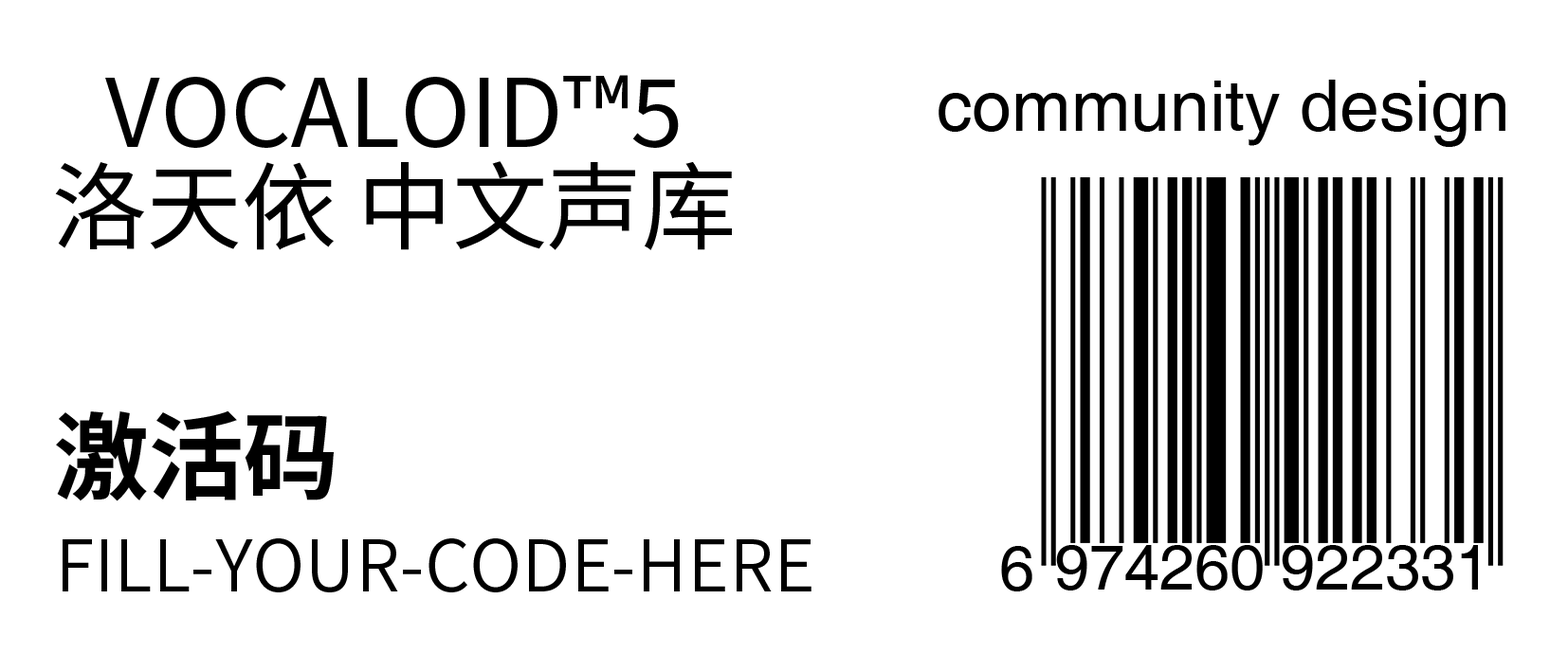
<style>
.page{position:relative;width:1568px;height:672px;background:#ffffff}
.page>*{position:absolute;margin:0}
.t1{font:94.8px/94.8px "SourceHanSansSC-Regular";color:#000000}
.t2{font:71.1px "Helvetica";color:#000000}
.t3{font:94.8px "SourceHanSansSC-Bold";color:#000000}
.t4{font:71.1px "SourceHanSansSC-Normal";color:#000000}
.t5{font:63.2px "Helvetica";color:#000000}
</style>
<div class="page">
<p class="t1" style="left:55px;top:75px;width:677px;height:175px;text-align:center">VOCALOID™5<br>洛天依 中文声库</p>
<p class="t2" style="left:939px;top:80px;width:566px;height:67px">community design</p>
<p class="t3" style="left:56px;top:410px;width:278px;height:91px">激活码</p>
<p class="t4" style="left:63px;top:538px;width:748px;height:55px">FILL-YOUR-CODE-HERE</p>
<p class="t5" style="left:1056px;top:545px;width:207px;height:46px">974260</p>
<p class="t5" style="left:1282px;top:545px;width:196px;height:46px">922331</p>
<p class="t5" style="left:1001px;top:546px;width:31px;height:46px">6</p>
</div>
